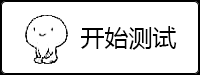
<style>
.page{position:relative;width:200px;height:75px;background:#ffffff}
.page>*{position:absolute;margin:0}
.t1{font:24px "MicrosoftYaHei";color:#000000}
</style>
<div class="page">
<p class="t1" style="left:81px;top:26px;width:96px;height:24px">开始测试</p>
</div>
